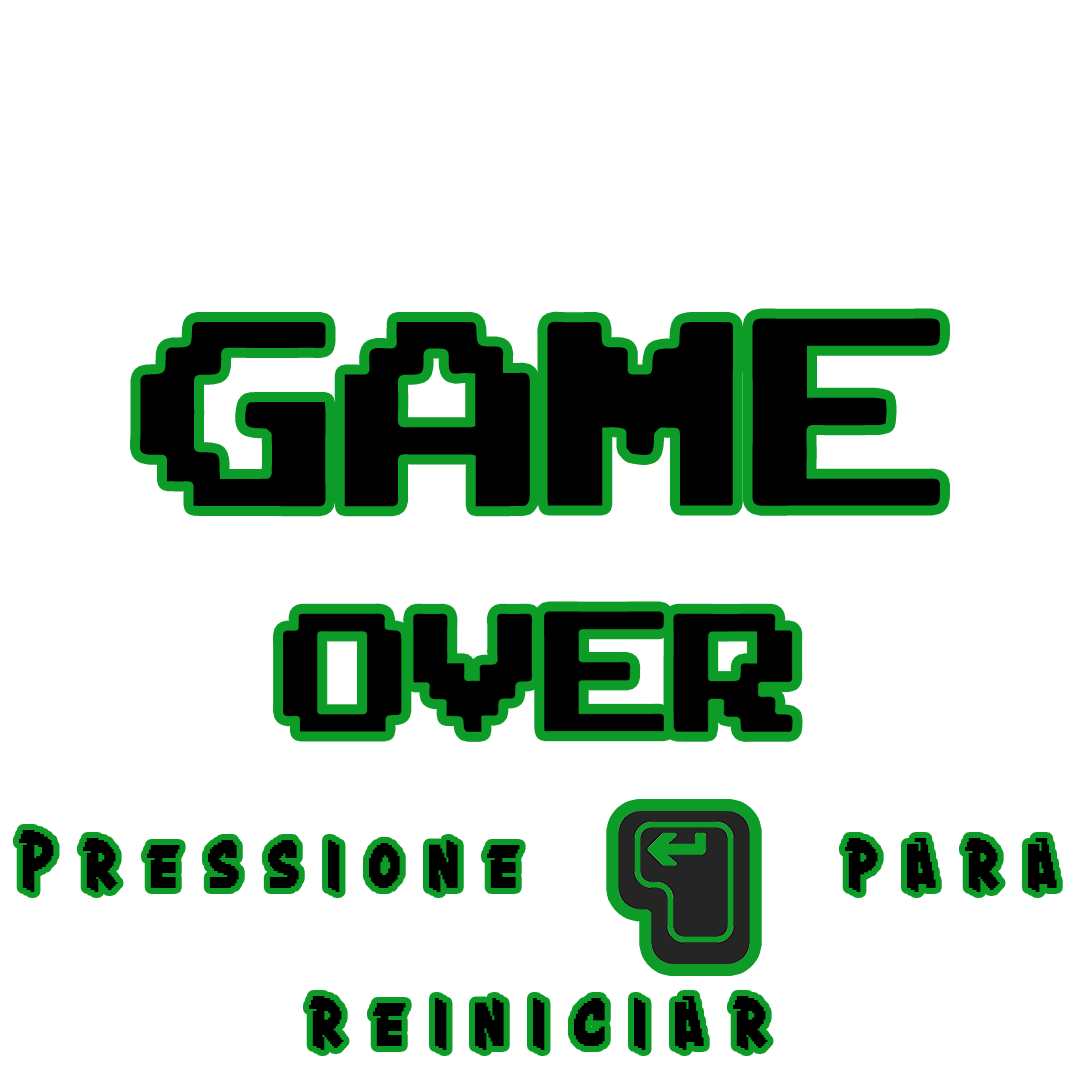
<style>
.page{position:relative;width:1080px;height:1080px;background:#ffffff}
.page>*{position:absolute;margin:0}
.t1{font:54px/79.2px "Crang";letter-spacing:0.54em;color:#000000;scale:0.88 1}
.t2{font:54px/158px "Crang";letter-spacing:0.54em;color:#000000;scale:0.88 1}
</style>
<div class="page">
<p class="t1" style="left:19px;top:830px;width:1038px;height:220px;text-align:center">Pressione        para <span class="t2">reiniciar</span></p>
</div>
